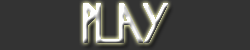
<style>
.page{position:relative;width:250px;height:50px;background:#333333}
.page>*{position:absolute;margin:0}
.t1{font:48px "exoziti";font-weight:bold}
</style>
<div class="page">
<p class="t1" style="left:83px;top:3px;width:85px;height:40px">PLAY</p>
</div>
